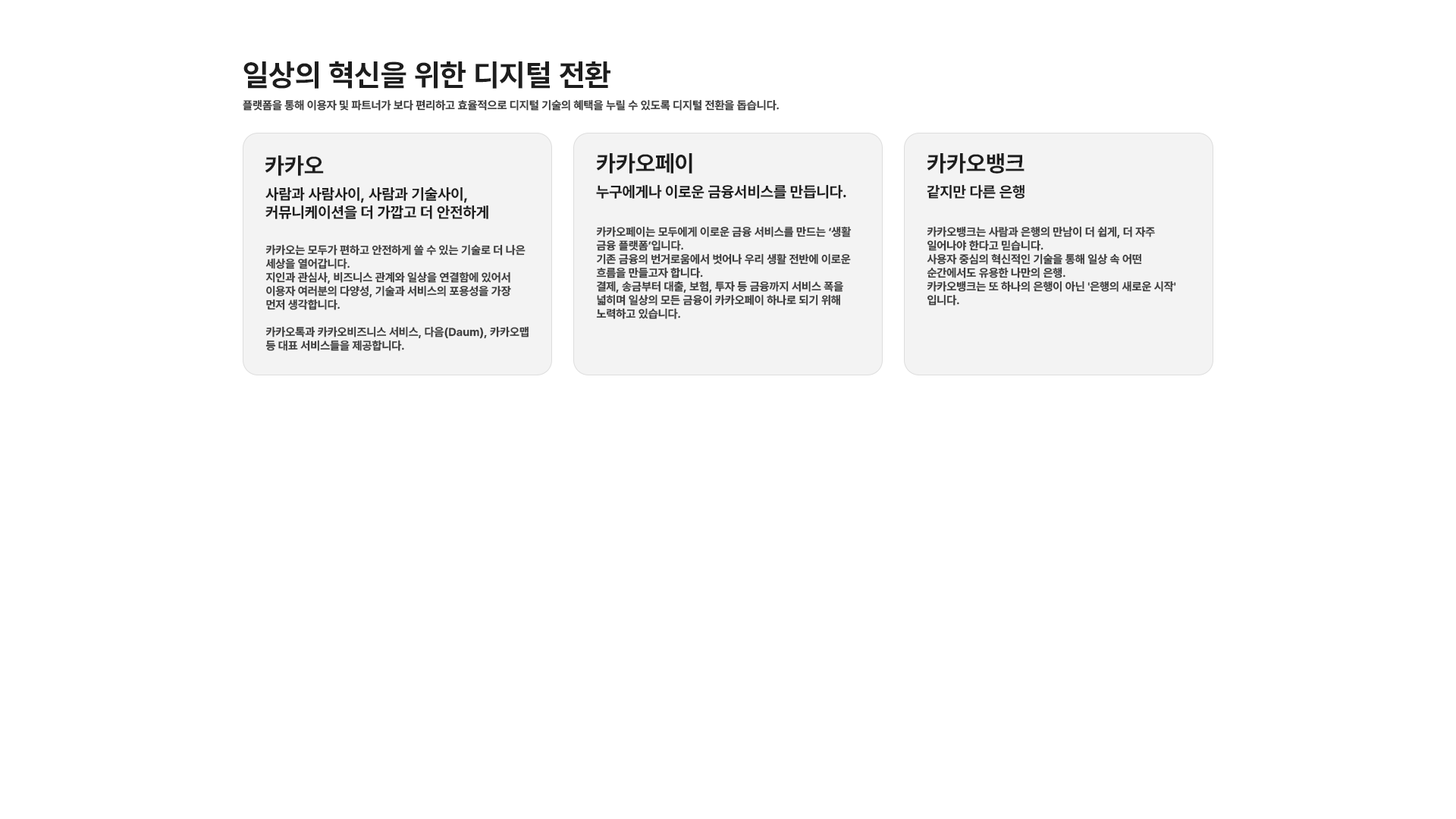
<style>
.page{position:relative;width:1456px;height:819px;background:#ffffff}
.page>*{position:absolute;margin:0}
.t1{font:30.3px "PretendardVariable-Bold";color:#1d1d1d}
.t2{font:11.4px "PretendardVariable-Bold";color:#3d3d3d}
.t3{font:22.7px "PretendardVariable-Bold";color:#1d1d1d}
.t4{font:15.2px "PretendardVariable-Bold";color:#1d1d1d}
</style>
<div class="page">
<p class="t1" style="left:243px;top:61px;width:367px;height:28px">일상의 혁신을 위한 디지털 전환</p>
<p class="t2" style="left:243px;top:99px;width:536px;height:12px">플랫폼을 통해 이용자 및 파트너가 보다 편리하고 효율적으로 디지털 기술의 혜택을 누릴 수 있도록 디지털 전환을 돕습니다.</p>
<p class="t3" style="left:265px;top:155px;width:59px;height:21px">카카오</p>
<p class="t3" style="left:596px;top:153px;width:96px;height:21px">카카오페이</p>
<p class="t3" style="left:927px;top:153px;width:97px;height:21px">카카오뱅크</p>
<p class="t4" style="left:596px;top:184px;width:250px;height:15px">누구에게나 이로운 금융서비스를 만듭니다.</p>
<p class="t4" style="left:927px;top:184px;width:97px;height:15px">같지만 다른 은행</p>
<p class="t4" style="left:265px;top:187px;width:223px;height:32px">사람과 사람사이, 사람과 기술사이,<br>커뮤니케이션을 더 가깝고 더 안전하게</p>
<p class="t2" style="left:596px;top:226px;width:256px;height:93px">카카오페이는 모두에게 이로운 금융 서비스를 만드는 ‘생활 금융 플랫폼’입니다.<br>기존 금융의 번거로움에서 벗어나 우리 생활 전반에 이로운 흐름을 만들고자 합니다.<br>결제, 송금부터 대출, 보험, 투자 등 금융까지 서비스 폭을 넓히며 일상의 모든 금융이 카카오페이 하나로 되기 위해 노력하고 있습니다.</p>
<p class="t2" style="left:927px;top:226px;width:249px;height:80px">카카오뱅크는 사람과 은행의 만남이 더 쉽게, 더 자주 일어나야 한다고 믿습니다.<br>사용자 중심의 혁신적인 기술을 통해 일상 속 어떤 순간에서도 유용한 나만의 은행.<br>카카오뱅크는 또 하나의 은행이 아닌 '은행의 새로운 시작' 입니다.</p>
<p class="t2" style="left:265px;top:244px;width:264px;height:107px">카카오는 모두가 편하고 안전하게 쓸 수 있는 기술로 더 나은 세상을 열어갑니다.<br>지인과 관심사, 비즈니스 관계와 일상을 연결함에 있어서 이용자 여러분의 다양성, 기술과 서비스의 포용성을 가장 먼저 생각합니다.<br><br>카카오톡과 카카오비즈니스 서비스, 다음(Daum), 카카오맵 등 대표 서비스들을 제공합니다.</p>
</div>
